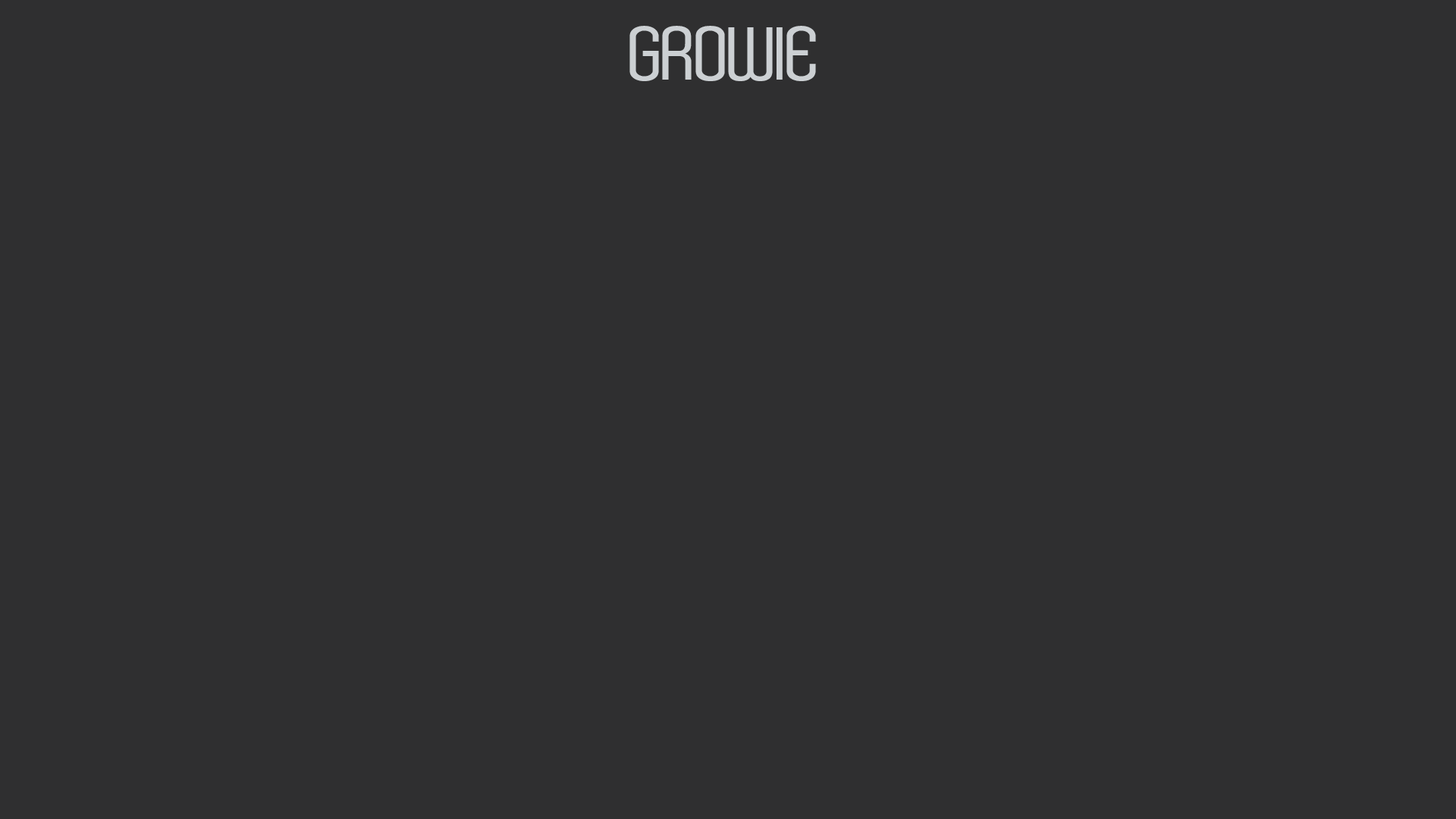
<style>
.page{position:relative;width:1456px;height:819px;background:#2f2f30}
.page>*{position:absolute;margin:0}
.t1{font:75.8px "KleptocracyTitlingLt-Regular";color:#ccd0d3}
</style>
<div class="page">
<p class="t1" style="left:629px;top:26px;width:187px;height:55px">Growie</p>
</div>
